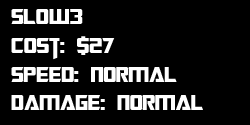
<style>
.page{position:relative;width:250px;height:125px;background:#000000}
.page>*{position:absolute;margin:0}
.t1{font:24px "TransformersMovie";color:#ffffff}
</style>
<div class="page">
<p class="t1" style="left:11px;top:9px;width:192px;height:101px">Slow3<br>Cost: $27<br>Speed: Normal<br>Damage: Normal</p>
</div>
